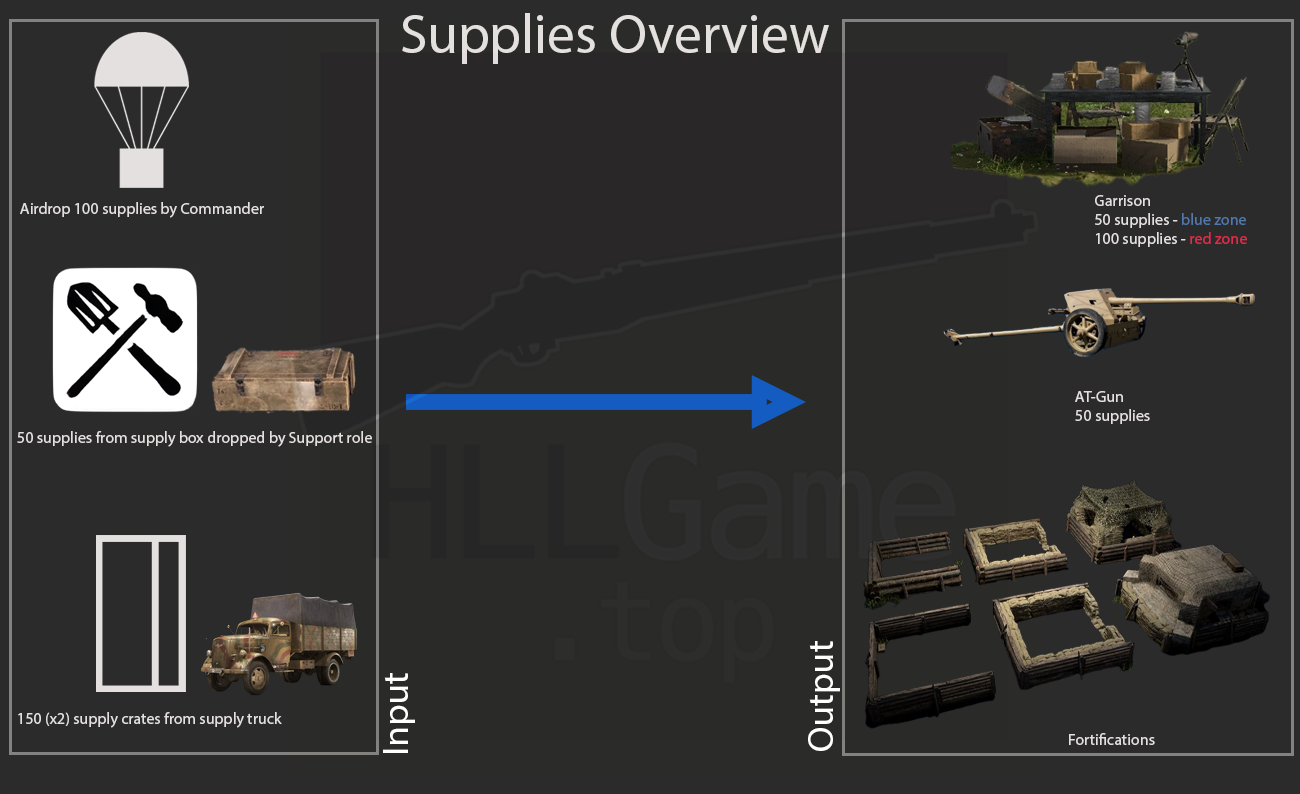
<style>
.page{position:relative;width:1300px;height:794px;background:#2b2b2b}
.page>*{position:absolute;margin:0}
.t1{font:55.6px "MyriadPro-Regular";color:#e4e0df}
.t2{font:16px "MyriadPro-Regular";color:#e4e0df}
.t3{font:16px "MyriadPro-Regular";color:#5177ad}
.t4{font:16px "MyriadPro-Regular";color:#e02b4c}
.t5{font:37px "MyriadPro-Regular";color:#ffffff}
</style>
<div class="page">
<p class="t1" style="left:402px;top:13px;width:427px;height:51px">Supplies Overview</p>
<p class="t2" style="left:1095px;top:195px;width:152px;height:52px">Garrison<br>50 supplies - <span class="t3">blue zone<br></span>100 supplies - <span class="t4">red zone</span></p>
<p class="t2" style="left:20px;top:202px;width:244px;height:16px">Airdrop 100 supplies by Commander</p>
<p class="t2" style="left:1075px;top:391px;width:75px;height:33px">AT-Gun<br>50 supplies</p>
<p class="t2" style="left:17px;top:431px;width:355px;height:16px">50 supplies from supply box dropped by Support role</p>
<p class="t5" style="left:808px;top:641px;width:32px;height:110px;rotate:-90deg">Output</p>
<p class="t5" style="left:383px;top:673px;width:32px;height:80px;rotate:-90deg">Input</p>
<p class="t2" style="left:18px;top:712px;width:264px;height:16px">150 (x2) supply crates from supply truck</p>
<p class="t2" style="left:1069px;top:733px;width:86px;height:12px">Fortifications</p>
</div>
